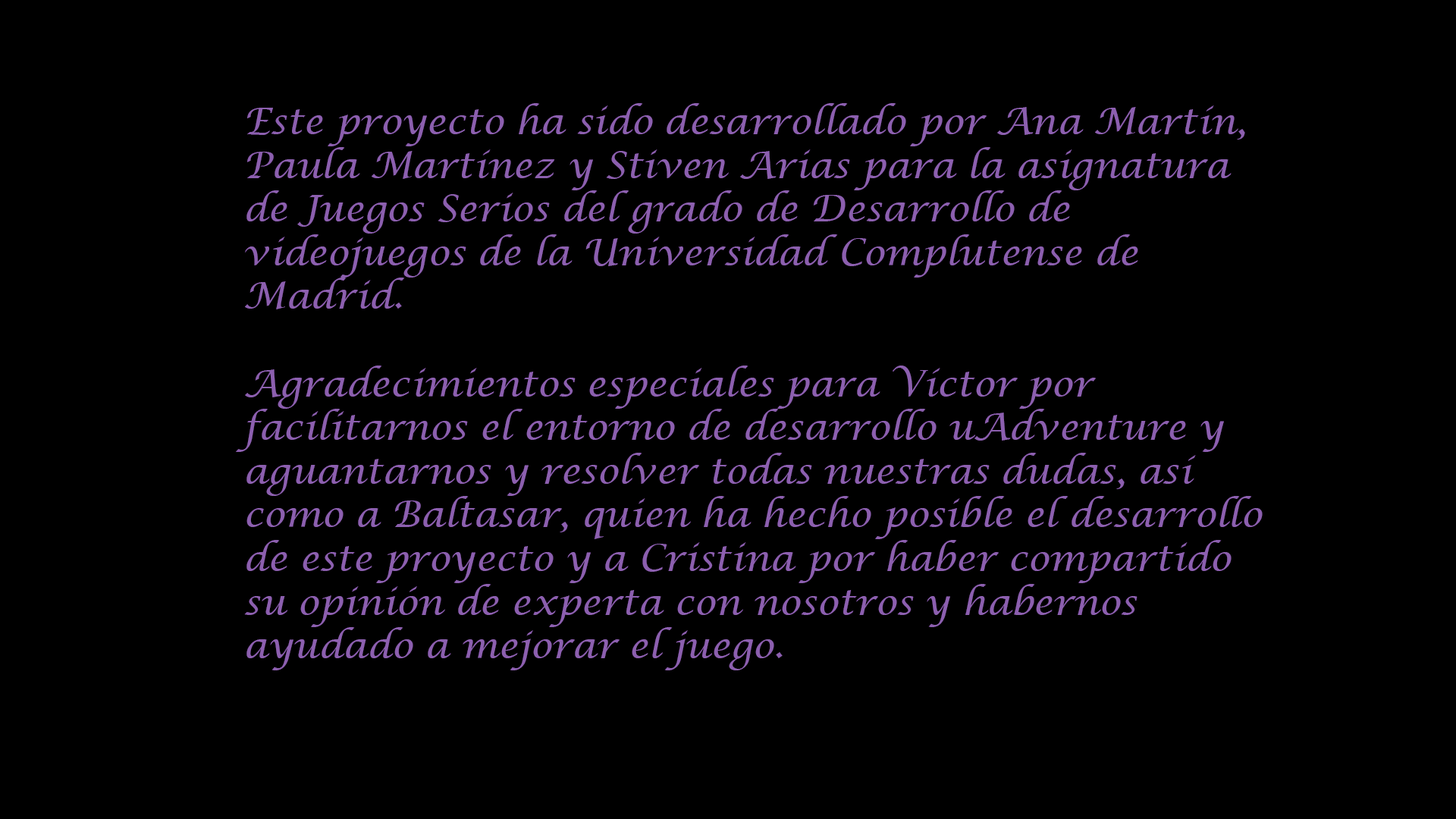
<style>
.page{position:relative;width:1456px;height:819px;background:#000000}
.page>*{position:absolute;margin:0}
.t1{font:36.4px "LucidaCalligraphy-Italic";color:#8c5faf}
</style>
<div class="page">
<p class="t1" style="left:236px;top:103px;width:1027px;height:567px">Este proyecto ha sido desarrollado por Ana Martín, Paula Martínez y Stiven Arias para la asignatura de Juegos Serios del grado de Desarrollo de videojuegos de la Universidad Complutense de Madrid.<br><br>Agradecimientos especiales para Víctor por facilitarnos el entorno de desarrollo uAdventure y aguantarnos y resolver todas nuestras dudas, así como a Baltasar, quien ha hecho posible el desarrollo de este proyecto y a Cristina por haber compartido su opinión de experta con nosotros y habernos ayudado a mejorar el juego.</p>
</div>
